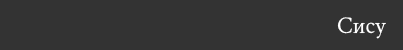
<style>
.page{position:relative;width:403px;height:50px;background:#333333}
.page>*{position:absolute;margin:0}
.t1{font:24px "CrimsonText-Regular";color:#ffffff}
</style>
<div class="page">
<p class="t1" style="left:337px;top:17px;width:49px;height:22px">Сису</p>
</div>
